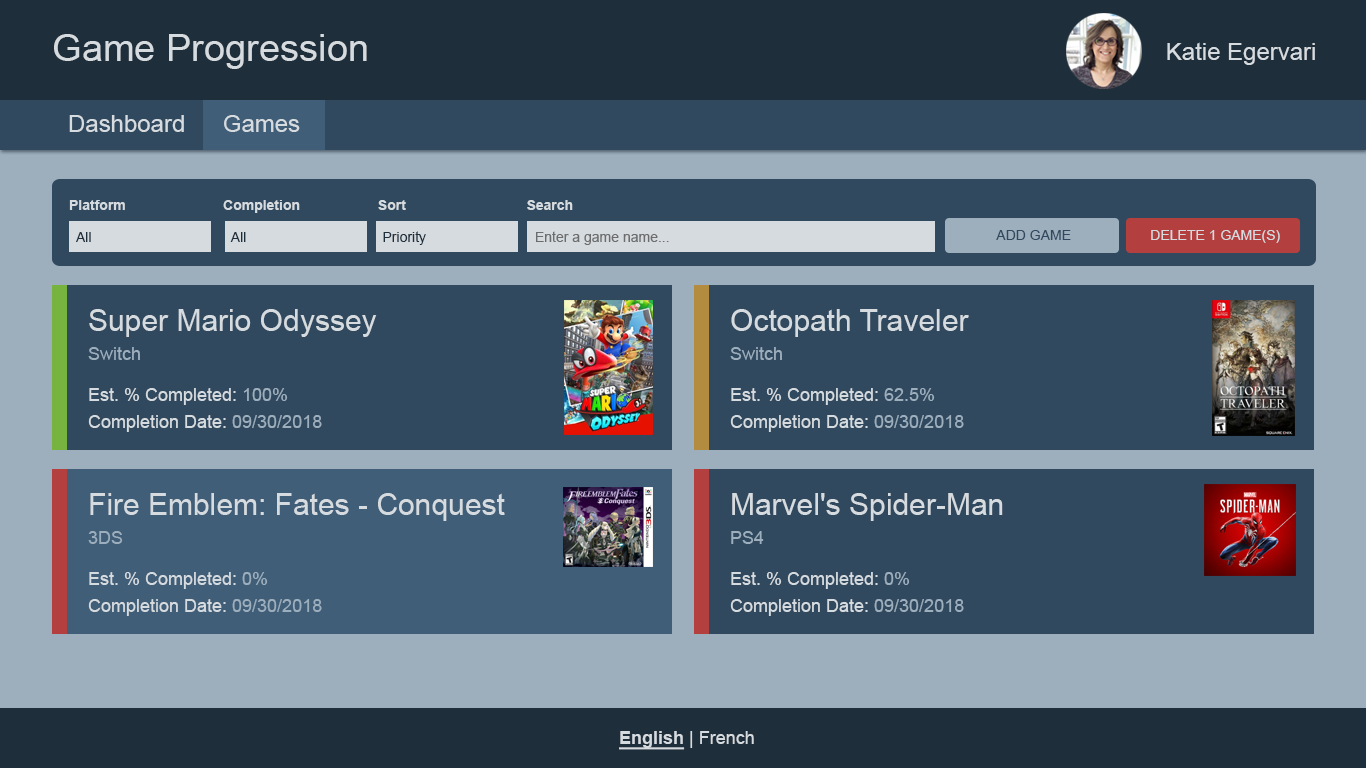
<style>
.page{position:relative;width:1366px;height:768px;background:#30495f}
.page>*{position:absolute;margin:0}
.t1{font:38px "ArialMT";color:#d6dbdf}
.t2{font:24px "ArialMT";color:#d6dbdf}
.t3{font:14px "ArialMT";color:#30495f}
.t4{font:14px "ArialMT";color:#d6dbdf}
.t5{font:30px/32px "ArialMT";color:#d6dbdf}
.t6{font:18px/29px "ArialMT";color:#9dafbd}
.t7{font:18px/41px "ArialMT";color:#d6dbdf}
.t8{font:18px/41px "ArialMT";color:#9dafbd}
.t9{font:18px/27px "ArialMT";color:#d6dbdf}
.t10{font:18px/27px "ArialMT";color:#9dafbd}
.t11{font:18px "ArialMT";color:#d6dbdf}
.t12{font:18px "Arial-BoldMT";color:#d6dbdf;text-decoration:underline}
</style>
<div class="page">
<p class="t1" style="left:54px;top:34px;width:313px;height:35px">Game Progression</p>
<p class="t2" style="left:1167px;top:42px;width:148px;height:23px">Katie Egervari</p>
<p class="t2" style="left:69px;top:115px;width:115px;height:17px">Dashboard</p>
<p class="t2" style="left:224px;top:115px;width:76px;height:17px">Games</p>
<p class="t3" style="left:996px;top:230px;width:75px;height:10px">ADD GAME</p>
<p class="t4" style="left:1151px;top:230px;width:129px;height:13px">DELETE 1 GAME(S)</p>
<p class="t5" style="left:88px;top:309px;width:289px;height:123px">Super Mario Odyssey<br><span class="t6">Switch<br></span><span class="t7">Est. % Completed: </span><span class="t8">100%<br></span><span class="t9">Completion Date: </span><span class="t10">09/30/2018</span></p>
<p class="t5" style="left:730px;top:309px;width:239px;height:123px">Octopath Traveler<br><span class="t6">Switch<br></span><span class="t7">Est. % Completed: </span><span class="t8">62.5%<br></span><span class="t9">Completion Date: </span><span class="t10">09/30/2018</span></p>
<p class="t5" style="left:88px;top:493px;width:417px;height:123px">Fire Emblem: Fates - Conquest<br><span class="t6">3DS<br></span><span class="t7">Est. % Completed: </span><span class="t8">0%<br></span><span class="t9">Completion Date: </span><span class="t10">09/30/2018</span></p>
<p class="t5" style="left:730px;top:493px;width:273px;height:123px">Marvel's Spider-Man<br><span class="t6">PS4<br></span><span class="t7">Est. % Completed: </span><span class="t8">0%<br></span><span class="t9">Completion Date: </span><span class="t10">09/30/2018</span></p>
<p class="t11" style="left:619px;top:731px;width:135px;height:19px"><span class="t12">English</span> | French</p>
</div>
